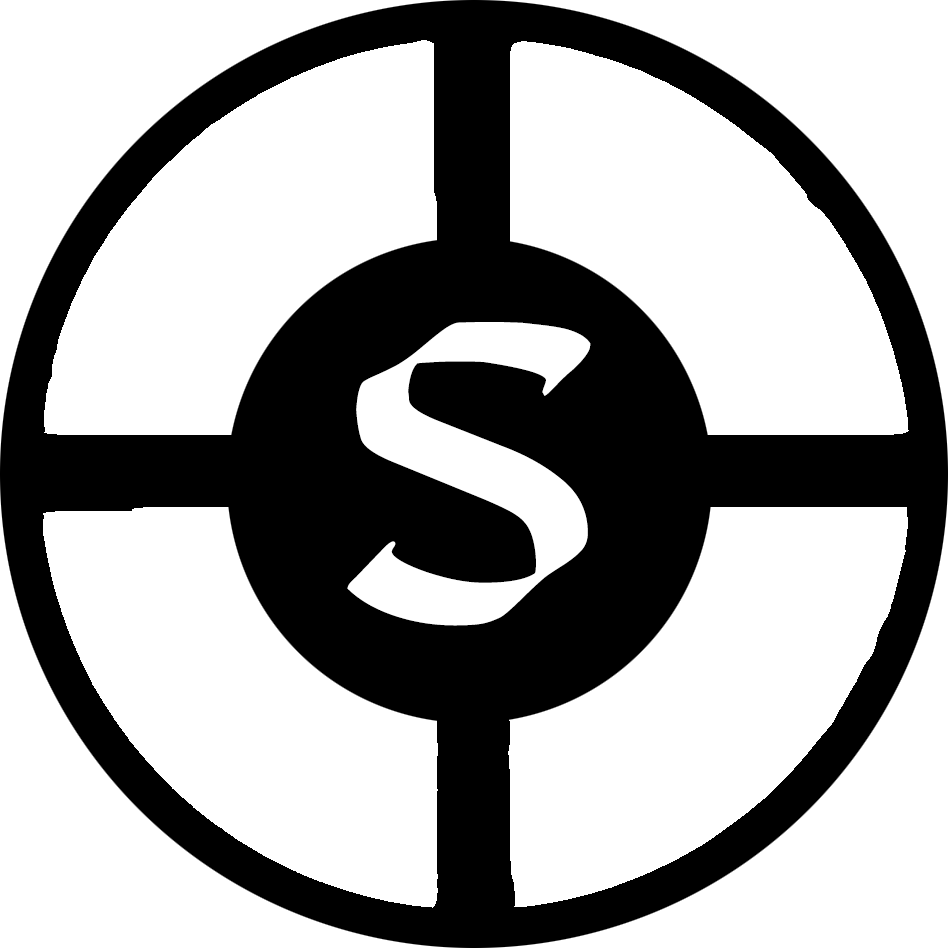
<style>
.page{position:relative;width:948px;height:948px;background:#ffffff}
.page>*{position:absolute;margin:0}
.t1{font:400px "VikingPlain";color:#ffffff}
</style>
<div class="page">
<p class="t1" style="left:347px;top:322px;width:244px;height:304px">S</p>
</div>
